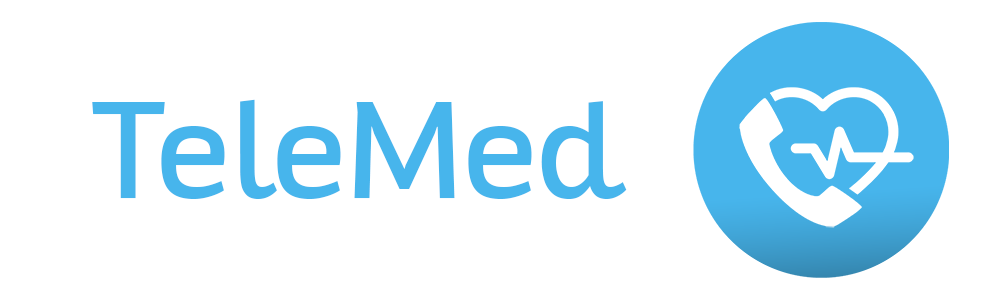
<style>
.page{position:relative;width:1000px;height:300px;background:#ffffff}
.page>*{position:absolute;margin:0}
.t1{font:133.3px "Altair-Regular";color:#47b5ec}
</style>
<div class="page">
<p class="t1" style="left:92px;top:99px;width:535px;height:100px">TeleMed</p>
</div>
